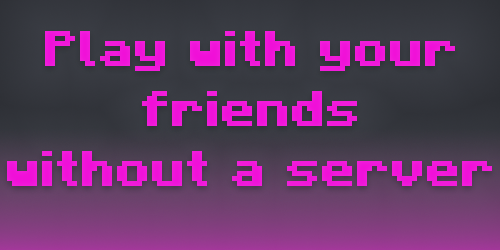
<style>
.page{position:relative;width:500px;height:250px}
.page>*{position:absolute;margin:0}
.t1{font:50px "Minecraft-Bold";color:#f017d9}
</style>
<div class="page">
<p class="t1" style="left:7px;top:31px;width:485px;height:155px;text-align:center">Play with your<br> friends <br>without a server</p>
</div>
